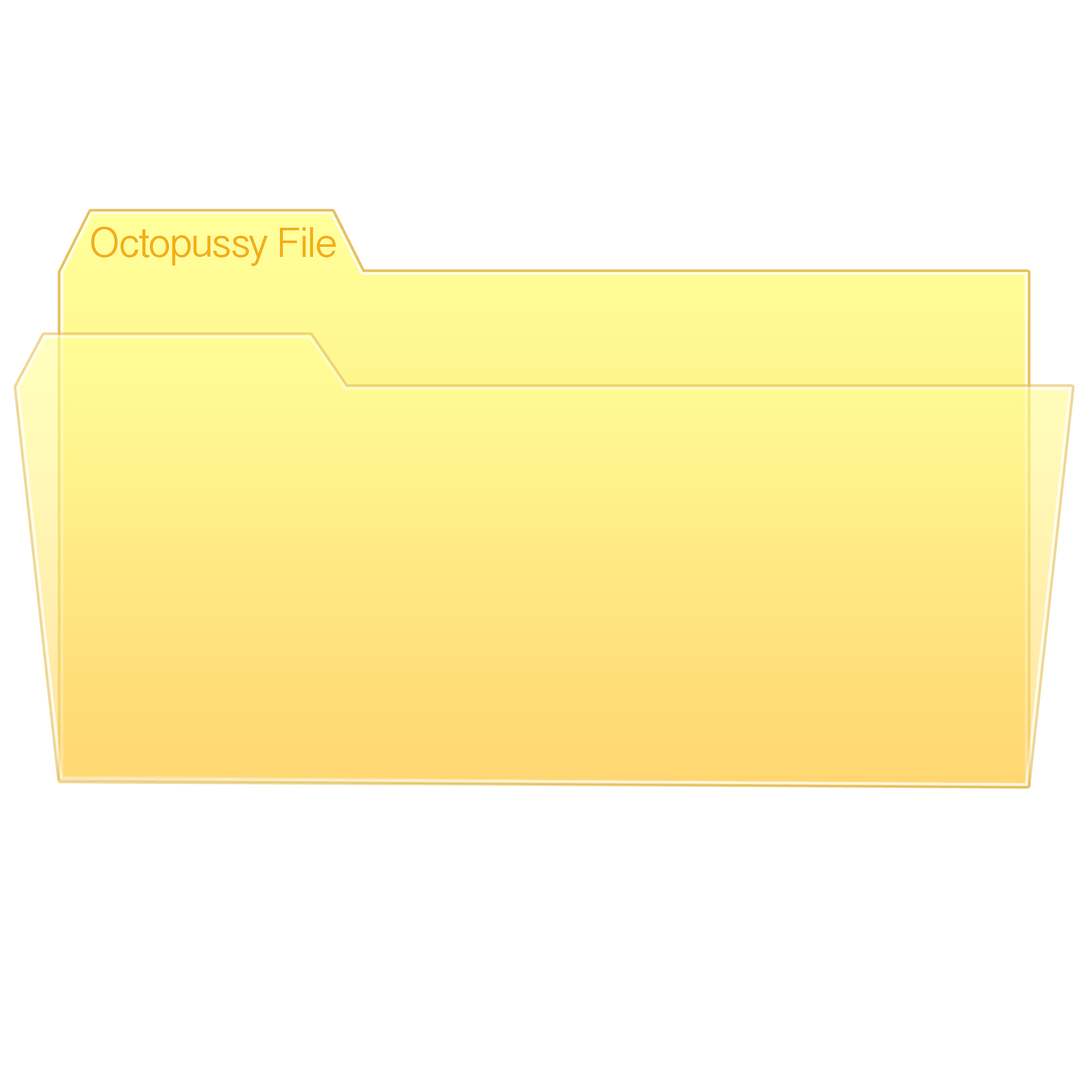
<style>
.page{position:relative;width:1092px;height:1092px;background:#ffffff}
.page>*{position:absolute;margin:0}
.t1{font:42.7px "MalayalamSangamMN";letter-spacing:-0.04em;color:#f3b00f}
</style>
<div class="page">
<p class="t1" style="left:91px;top:227px;width:245px;height:39px">Octopussy File</p>
</div>
